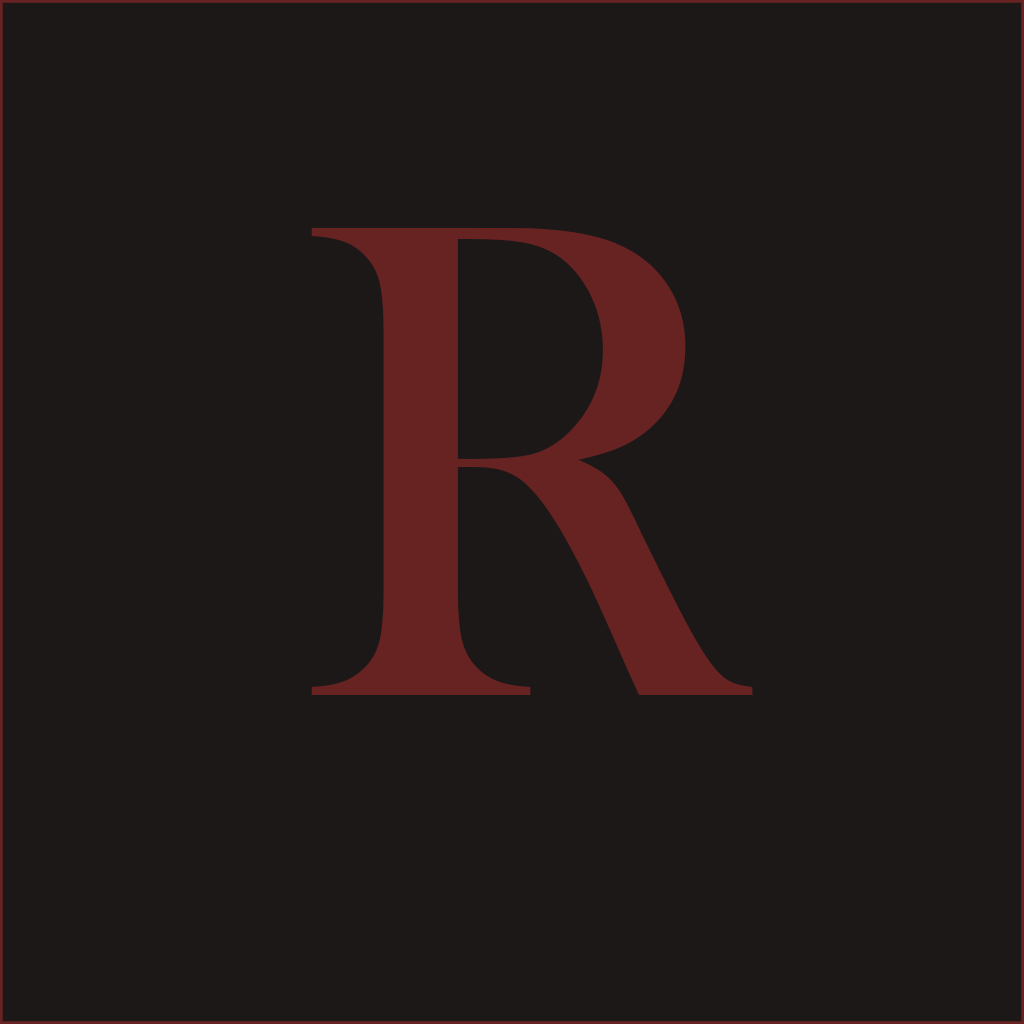
<style>
.page{position:relative;width:1024px;height:1024px;background:#1c1818}
.page>*{position:absolute;margin:0}
.t1{font:700px "BaskOldFace";color:#672222}
</style>
<div class="page">
<p class="t1" style="left:311px;top:227px;width:442px;height:468px">R</p>
</div>
